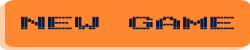
<style>
.page{position:relative;width:250px;height:50px;background:#ff872f}
.page>*{position:absolute;margin:0}
.t1{font:27.1px "Arcade";color:#0d1d3e;scale:1.92 1}
</style>
<div class="page">
<p class="t1" style="left:21px;top:16px;width:213px;height:14px">NEW GAME</p>
</div>
